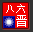
<style>
.page{position:relative;width:33px;height:32px;background:#f20000}
.page>*{position:absolute;margin:0}
.t1{font:10.4px "SimSun";color:#ffffff}
.t2{font:11.7px "SimSun";color:#ffffff}
</style>
<div class="page">
<p class="t1" style="left:6px;top:4px;width:19px;height:9px">八六</p>
<p class="t2" style="left:16px;top:15px;width:11px;height:12px">晋</p>
</div>
